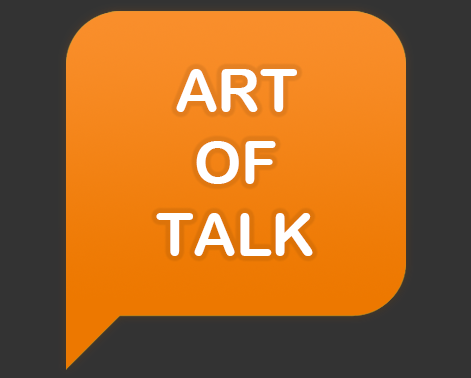
<style>
.page{position:relative;width:471px;height:378px;background:#333333}
.page>*{position:absolute;margin:0}
.t1{font:60px "ArialRoundedMTBold";letter-spacing:-0.01em;color:#ffffff}
</style>
<div class="page">
<p class="t1" style="left:156px;top:69px;width:157px;height:187px;text-align:center">ART<br>OF<br>TALK</p>
</div>
